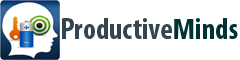
<style>
.page{position:relative;width:240px;height:60px;background:#ffffff}
.page>*{position:absolute;margin:0}
.t1{font:30px "MyriadPro-BoldCond";color:#35454f}
.t2{font:30px "MyriadPro-BoldCond";color:#003333}
.t3{font:26.7px "Arial-BoldMT";color:#003333}
</style>
<div class="page">
<p class="t1" style="left:62px;top:18px;width:110px;height:21px">Productive</p>
<p class="t2" style="left:174px;top:18px;width:64px;height:21px"><span class="t3">M</span>inds</p>
</div>
